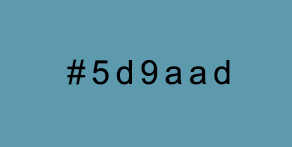
<style>
.page{position:relative;width:292px;height:147px;background:#5d9aad}
.page>*{position:absolute;margin:0}
.t1{font:33.3px "ArialMT";letter-spacing:0.175em;color:#000000}
</style>
<div class="page">
<p class="t1" style="left:67px;top:59px;width:163px;height:26px">#5d9aad</p>
</div>
